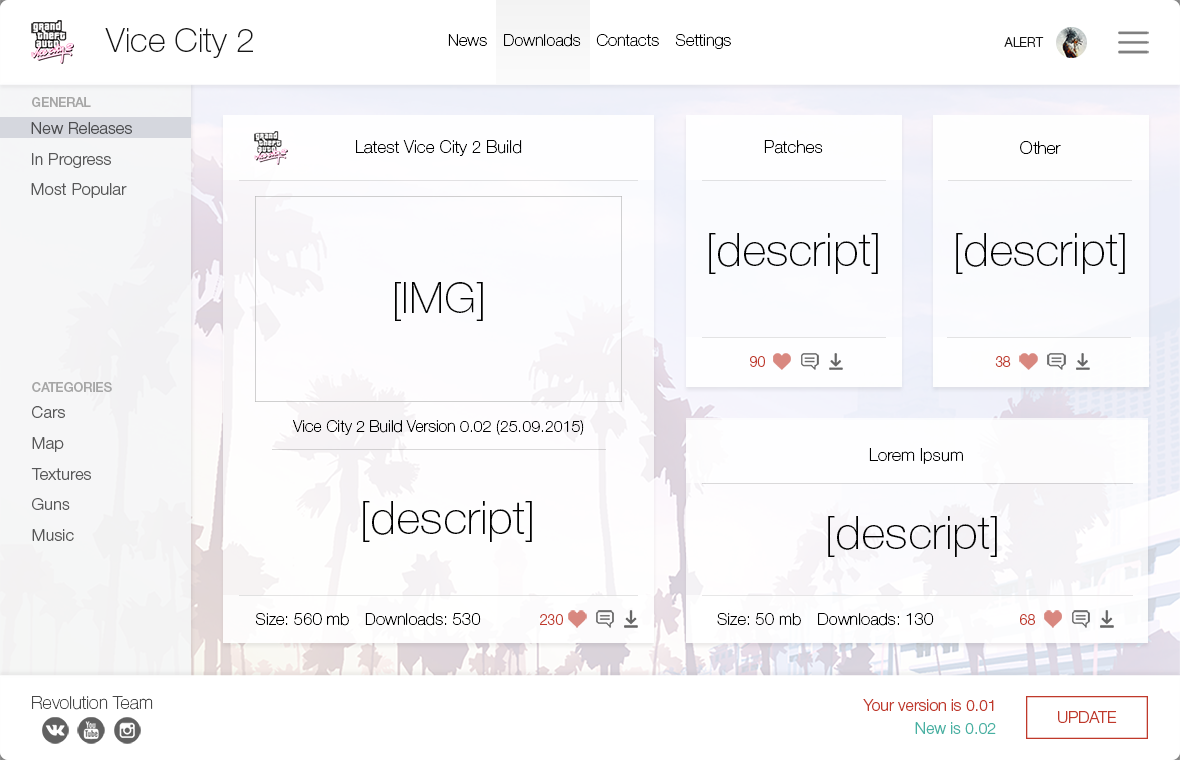
<style>
.page{position:relative;width:1180px;height:760px;background:#ffffff}
.page>*{position:absolute;margin:0}
.t1{font:33.2px "HelveticaNeueCyr-Thin";color:#161616}
.t2{font:16.6px "HelveticaNeueCyr-Thin";color:#000000}
.t3{font:12.8px "HelveticaNeueCyr-Light";color:#161616}
.t4{font:12.8px "HelveticaNeueCyr-Medium";color:#a6a6a6}
.t5{font:16.6px "HelveticaNeueCyr-Light";color:#4d4d50}
.t6{font:17.2px "HelveticaNeueCyr-Thin";color:#000000}
.t7{font:16.6px "HelveticaNeueCyr-Light";color:#585859}
.t8{font:45.9px "HelveticaNeueCyr-Thin";color:#000000}
.t9{font:43.1px "HelveticaNeueCyr-Thin";color:#000000}
.t10{font:15.2px "HelveticaNeueCyr-Light";color:#c0392b;scale:0.92 1}
.t11{font:15.9px "HelveticaNeueCyr-Thin";color:#000000}
.t12{font:16.7px "HelveticaNeueCyr-Light";color:#585859}
.t13{font:16.7px "HelveticaNeueCyr-Light";color:#585858}
.t14{font:17.9px "HelveticaNeueCyr-Thin";color:#474747}
.t15{font:15.9px "HelveticaNeueCyr-Light";color:#c0392b}
.t16{font:15.9px "HelveticaNeueCyr-Light";color:#47b1a3}
</style>
<div class="page">
<p class="t1" style="left:105px;top:28px;width:148px;height:30px">Vice City 2</p>
<p class="t2" style="left:448px;top:34px;width:39px;height:12px">News</p>
<p class="t2" style="left:504px;top:34px;width:77px;height:13px">Downloads</p>
<p class="t2" style="left:596px;top:34px;width:63px;height:13px">Contacts</p>
<p class="t2" style="left:675px;top:34px;width:56px;height:15px">Settings</p>
<p class="t3" style="left:1004px;top:37px;width:40px;height:10px">ALERT</p>
<p class="t4" style="left:32px;top:97px;width:59px;height:10px">GENERAL</p>
<p class="t5" style="left:31px;top:122px;width:101px;height:12px">New Releases</p>
<p class="t6" style="left:356px;top:140px;width:166px;height:16px">Latest Vice City 2 Build</p>
<p class="t6" style="left:764px;top:140px;width:59px;height:14px">Patches</p>
<p class="t6" style="left:1020px;top:141px;width:41px;height:13px">Other</p>
<p class="t7" style="left:32px;top:153px;width:79px;height:15px">In Progress</p>
<p class="t7" style="left:31px;top:183px;width:96px;height:15px">Most Popular</p>
<p class="t8" style="left:709px;top:233px;width:169px;height:41px">[descript]</p>
<p class="t8" style="left:956px;top:233px;width:169px;height:41px">[descript]</p>
<p class="t9" style="left:395px;top:282px;width:88px;height:39px">[IMG]</p>
<p class="t10" style="left:750px;top:356px;width:15px;height:11px">90</p>
<p class="t10" style="left:995px;top:356px;width:16px;height:11px">38</p>
<p class="t4" style="left:32px;top:382px;width:80px;height:10px">CATEGORIES</p>
<p class="t7" style="left:32px;top:406px;width:33px;height:12px">Cars</p>
<p class="t11" style="left:293px;top:420px;width:291px;height:15px">Vice City 2 Build Version 0.02 (25.09.2015)</p>
<p class="t12" style="left:32px;top:437px;width:32px;height:15px">Map</p>
<p class="t6" style="left:869px;top:448px;width:94px;height:16px">Lorem Ipsum</p>
<p class="t12" style="left:31px;top:468px;width:60px;height:12px">Textures</p>
<p class="t12" style="left:32px;top:498px;width:38px;height:12px">Guns</p>
<p class="t8" style="left:363px;top:501px;width:169px;height:41px">[descript]</p>
<p class="t8" style="left:828px;top:516px;width:169px;height:41px">[descript]</p>
<p class="t13" style="left:32px;top:529px;width:42px;height:12px">Music</p>
<p class="t2" style="left:255px;top:613px;width:94px;height:13px">Size: 560 mb</p>
<p class="t2" style="left:365px;top:613px;width:116px;height:13px">Downloads: 530</p>
<p class="t10" style="left:540px;top:614px;width:23px;height:11px">230</p>
<p class="t2" style="left:717px;top:613px;width:84px;height:13px">Size: 50 mb</p>
<p class="t2" style="left:818px;top:613px;width:116px;height:13px">Downloads: 130</p>
<p class="t10" style="left:1020px;top:614px;width:15px;height:11px">68</p>
<p class="t14" style="left:32px;top:696px;width:121px;height:14px">Revolution Team</p>
<p class="t15" style="left:863px;top:699px;width:131px;height:12px">Your version is 0.01</p>
<p class="t15" style="left:1058px;top:711px;width:59px;height:12px">UPDATE</p>
<p class="t16" style="left:915px;top:722px;width:81px;height:12px">New is 0.02</p>
</div>
